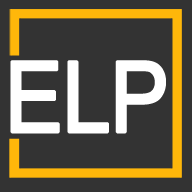
<style>
.page{position:relative;width:192px;height:192px;background:#333333}
.page>*{position:absolute;margin:0}
.t1{font:98.4px "ArialMT";color:#ffffff;font-weight:bold;scale:0.89 1}
</style>
<div class="page">
<p class="t1" style="left:10px;top:60px;width:156px;height:74px">ELP</p>
</div>
